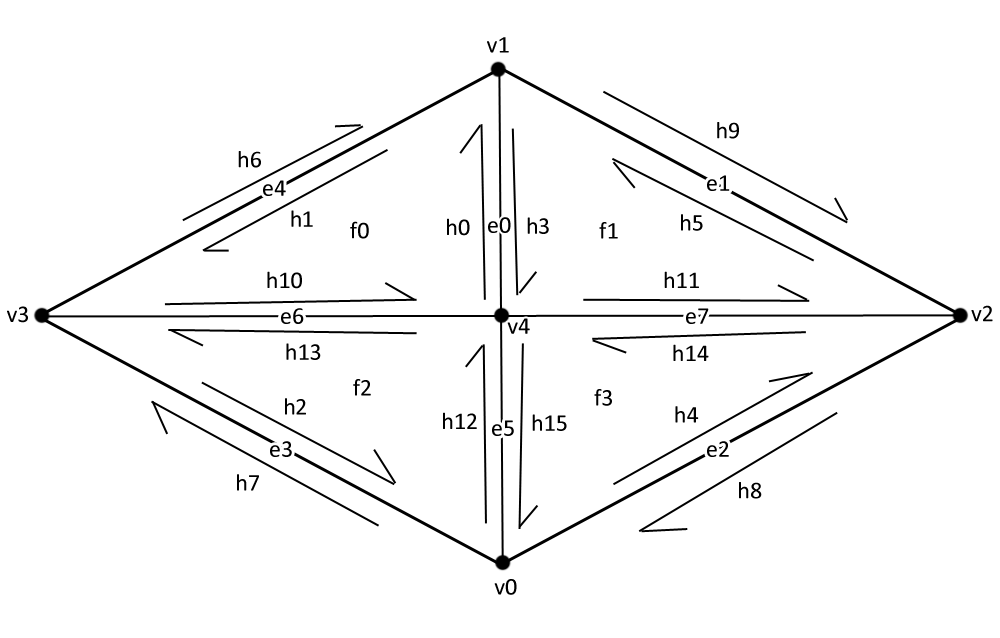
<style>
.page{position:relative;width:1000px;height:638px;background:#ffffff}
.page>*{position:absolute;margin:0}
.t1{font:24px "Calibri";color:#000000}
</style>
<div class="page">
<p class="t1" style="left:487px;top:37px;width:22px;height:16px">v1</p>
<p class="t1" style="left:717px;top:122px;width:22px;height:17px">h9</p>
<p class="t1" style="left:238px;top:151px;width:23px;height:17px">h6</p>
<p class="t1" style="left:263px;top:180px;width:23px;height:16px">e4</p>
<p class="t1" style="left:707px;top:175px;width:23px;height:16px">e1</p>
<p class="t1" style="left:291px;top:210px;width:22px;height:17px">h1</p>
<p class="t1" style="left:350px;top:221px;width:19px;height:18px">f0</p>
<p class="t1" style="left:447px;top:218px;width:23px;height:18px">h0</p>
<p class="t1" style="left:488px;top:217px;width:23px;height:16px">e0</p>
<p class="t1" style="left:527px;top:217px;width:22px;height:17px">h3</p>
<p class="t1" style="left:599px;top:222px;width:19px;height:17px">f1</p>
<p class="t1" style="left:681px;top:214px;width:22px;height:17px">h5</p>
<p class="t1" style="left:267px;top:271px;width:35px;height:18px">h10</p>
<p class="t1" style="left:664px;top:271px;width:35px;height:17px">h11</p>
<p class="t1" style="left:971px;top:305px;width:22px;height:17px">v2</p>
<p class="t1" style="left:7px;top:306px;width:21px;height:17px">v3</p>
<p class="t1" style="left:281px;top:308px;width:23px;height:16px">e6</p>
<p class="t1" style="left:507px;top:318px;width:23px;height:16px">v4</p>
<p class="t1" style="left:686px;top:308px;width:23px;height:16px">e7</p>
<p class="t1" style="left:286px;top:343px;width:35px;height:17px">h13</p>
<p class="t1" style="left:673px;top:344px;width:36px;height:17px">h14</p>
<p class="t1" style="left:353px;top:379px;width:18px;height:17px">f2</p>
<p class="t1" style="left:594px;top:389px;width:18px;height:17px">f3</p>
<p class="t1" style="left:285px;top:398px;width:21px;height:17px">h2</p>
<p class="t1" style="left:443px;top:412px;width:34px;height:17px">h12</p>
<p class="t1" style="left:532px;top:414px;width:35px;height:17px">h15</p>
<p class="t1" style="left:675px;top:406px;width:24px;height:17px">h4</p>
<p class="t1" style="left:492px;top:420px;width:22px;height:16px">e5</p>
<p class="t1" style="left:270px;top:441px;width:22px;height:16px">e3</p>
<p class="t1" style="left:707px;top:441px;width:22px;height:16px">e2</p>
<p class="t1" style="left:237px;top:474px;width:22px;height:17px">h7</p>
<p class="t1" style="left:739px;top:482px;width:23px;height:17px">h8</p>
<p class="t1" style="left:494px;top:579px;width:23px;height:16px">v0</p>
</div>
